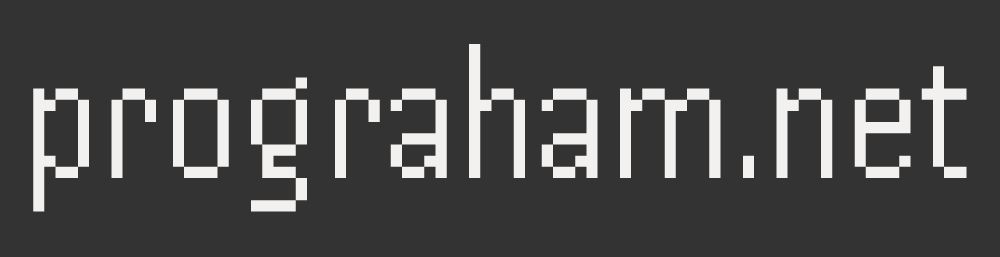
<style>
.page{position:relative;width:1000px;height:257px;background:#333333}
.page>*{position:absolute;margin:0}
.t1{font:190px "Handjet-Regular";color:#f2f1ef}
</style>
<div class="page">
<p class="t1" style="left:33px;top:43px;width:934px;height:169px">prograham.net</p>
</div>
